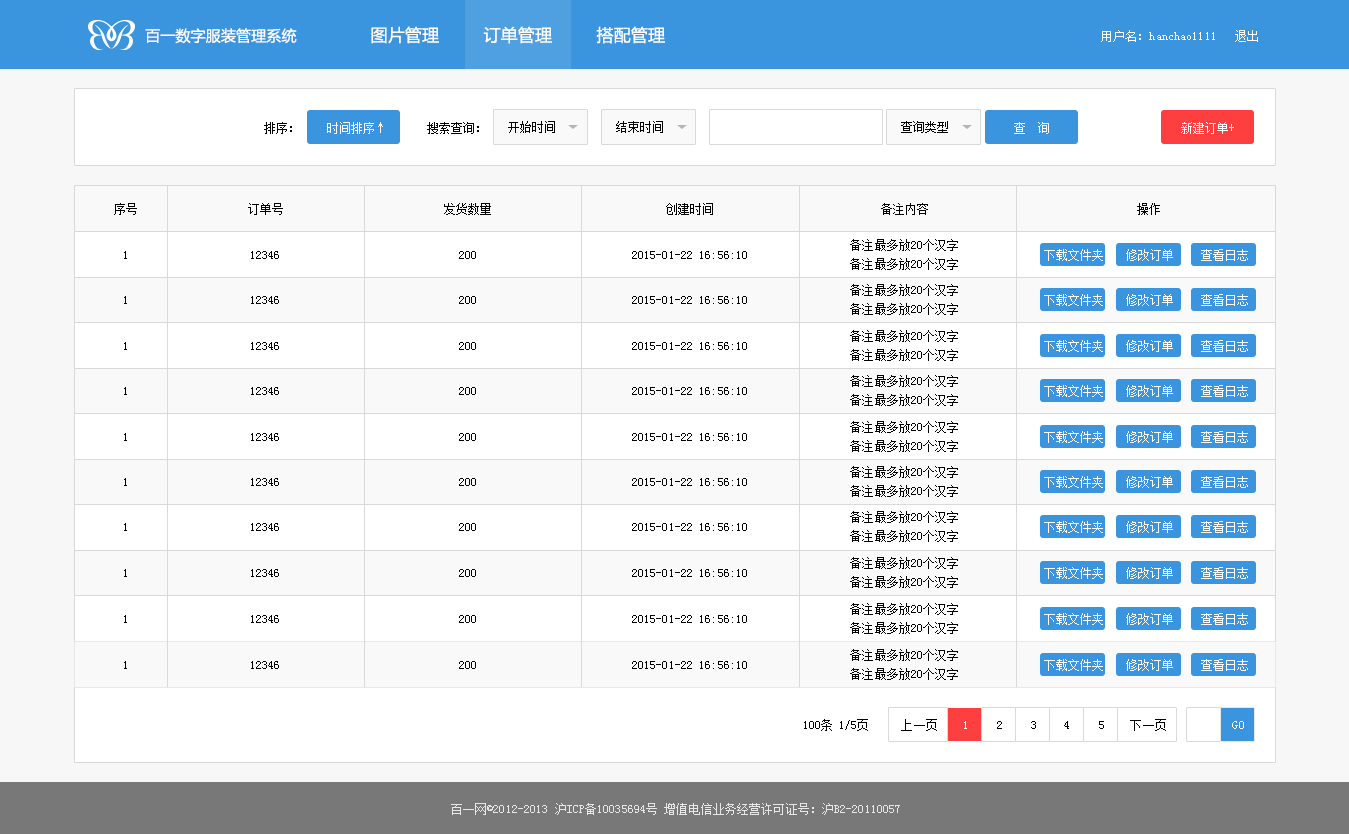
<style>
.page{position:relative;width:1349px;height:834px;background:#ffffff}
.page>*{position:absolute;margin:0}
.t1{font:15px "MicrosoftYaHei";letter-spacing:0.01em;color:#ffffff}
.t2{font:17px "MicrosoftYaHei";letter-spacing:0.01em;color:#ffffff}
.t3{font:12px "SimSun";letter-spacing:0.01em;color:#ffffff}
.t4{font:12px "SimSun";letter-spacing:0.01em;color:#000000}
.t5{font:12px "SimSun";letter-spacing:0.01em;color:#e8e8e8}
</style>
<div class="page">
<p class="t1" style="left:145px;top:28px;width:152px;height:16px">百一数字服装管理系统</p>
<p class="t2" style="left:371px;top:26px;width:68px;height:18px">图片管理</p>
<p class="t2" style="left:483px;top:26px;width:69px;height:18px">订单管理</p>
<p class="t2" style="left:596px;top:26px;width:69px;height:18px">搭配管理</p>
<p class="t3" style="left:1101px;top:30px;width:114px;height:12px">用户名：hanchao1111</p>
<p class="t3" style="left:1235px;top:30px;width:23px;height:12px">退出</p>
<p class="t4" style="left:264px;top:122px;width:28px;height:12px">排序：</p>
<p class="t3" style="left:327px;top:122px;width:56px;height:12px">时间排序↑</p>
<p class="t4" style="left:427px;top:122px;width:52px;height:12px">搜索查询：</p>
<p class="t4" style="left:508px;top:121px;width:47px;height:12px">开始时间</p>
<p class="t4" style="left:616px;top:121px;width:47px;height:12px">结束时间</p>
<p class="t4" style="left:901px;top:121px;width:47px;height:12px">查询类型</p>
<p class="t3" style="left:1014px;top:122px;width:35px;height:12px">查  询</p>
<p class="t3" style="left:1181px;top:122px;width:53px;height:12px">新建订单+</p>
<p class="t4" style="left:114px;top:203px;width:23px;height:12px">序号</p>
<p class="t4" style="left:248px;top:203px;width:35px;height:12px">订单号</p>
<p class="t4" style="left:444px;top:203px;width:47px;height:12px">发货数量</p>
<p class="t4" style="left:666px;top:203px;width:47px;height:12px">创建时间</p>
<p class="t4" style="left:881px;top:203px;width:47px;height:12px">备注内容</p>
<p class="t4" style="left:1137px;top:203px;width:23px;height:12px">操作</p>
<p class="t4" style="left:850px;top:239px;width:108px;height:12px">备注最多放20个汉字</p>
<p class="t4" style="left:124px;top:251px;width:3px;height:8px">1</p>
<p class="t4" style="left:251px;top:251px;width:28px;height:8px">12346</p>
<p class="t4" style="left:459px;top:251px;width:17px;height:8px">200</p>
<p class="t4" style="left:632px;top:251px;width:115px;height:8px">2015-01-22 16:56:10</p>
<p class="t3" style="left:1044px;top:249px;width:59px;height:12px">下载文件夹</p>
<p class="t3" style="left:1126px;top:249px;width:47px;height:12px">修改订单</p>
<p class="t3" style="left:1201px;top:249px;width:47px;height:12px">查看日志</p>
<p class="t4" style="left:850px;top:258px;width:108px;height:12px">备注最多放20个汉字</p>
<p class="t4" style="left:850px;top:284px;width:108px;height:12px">备注最多放20个汉字</p>
<p class="t3" style="left:1044px;top:294px;width:59px;height:12px">下载文件夹</p>
<p class="t3" style="left:1126px;top:294px;width:47px;height:12px">修改订单</p>
<p class="t3" style="left:1201px;top:294px;width:47px;height:12px">查看日志</p>
<p class="t4" style="left:124px;top:296px;width:3px;height:8px">1</p>
<p class="t4" style="left:251px;top:296px;width:28px;height:8px">12346</p>
<p class="t4" style="left:459px;top:296px;width:17px;height:8px">200</p>
<p class="t4" style="left:632px;top:296px;width:115px;height:8px">2015-01-22 16:56:10</p>
<p class="t4" style="left:850px;top:303px;width:108px;height:12px">备注最多放20个汉字</p>
<p class="t4" style="left:124px;top:342px;width:3px;height:8px">1</p>
<p class="t4" style="left:251px;top:342px;width:28px;height:8px">12346</p>
<p class="t4" style="left:459px;top:342px;width:17px;height:8px">200</p>
<p class="t4" style="left:632px;top:342px;width:115px;height:8px">2015-01-22 16:56:10</p>
<p class="t4" style="left:850px;top:330px;width:108px;height:12px">备注最多放20个汉字</p>
<p class="t3" style="left:1044px;top:340px;width:59px;height:12px">下载文件夹</p>
<p class="t3" style="left:1126px;top:340px;width:47px;height:12px">修改订单</p>
<p class="t3" style="left:1201px;top:340px;width:47px;height:12px">查看日志</p>
<p class="t4" style="left:850px;top:349px;width:108px;height:12px">备注最多放20个汉字</p>
<p class="t4" style="left:850px;top:375px;width:108px;height:12px">备注最多放20个汉字</p>
<p class="t4" style="left:124px;top:387px;width:3px;height:8px">1</p>
<p class="t4" style="left:251px;top:387px;width:28px;height:8px">12346</p>
<p class="t4" style="left:459px;top:387px;width:17px;height:8px">200</p>
<p class="t4" style="left:632px;top:387px;width:115px;height:8px">2015-01-22 16:56:10</p>
<p class="t3" style="left:1044px;top:385px;width:59px;height:12px">下载文件夹</p>
<p class="t3" style="left:1126px;top:385px;width:47px;height:12px">修改订单</p>
<p class="t3" style="left:1201px;top:385px;width:47px;height:12px">查看日志</p>
<p class="t4" style="left:850px;top:394px;width:108px;height:12px">备注最多放20个汉字</p>
<p class="t4" style="left:850px;top:421px;width:108px;height:12px">备注最多放20个汉字</p>
<p class="t4" style="left:124px;top:433px;width:3px;height:8px">1</p>
<p class="t4" style="left:251px;top:433px;width:28px;height:8px">12346</p>
<p class="t4" style="left:459px;top:433px;width:17px;height:8px">200</p>
<p class="t4" style="left:632px;top:433px;width:115px;height:8px">2015-01-22 16:56:10</p>
<p class="t3" style="left:1044px;top:431px;width:59px;height:12px">下载文件夹</p>
<p class="t3" style="left:1126px;top:431px;width:47px;height:12px">修改订单</p>
<p class="t3" style="left:1201px;top:431px;width:47px;height:12px">查看日志</p>
<p class="t4" style="left:850px;top:440px;width:108px;height:12px">备注最多放20个汉字</p>
<p class="t4" style="left:850px;top:466px;width:108px;height:12px">备注最多放20个汉字</p>
<p class="t4" style="left:124px;top:478px;width:3px;height:8px">1</p>
<p class="t4" style="left:251px;top:478px;width:28px;height:8px">12346</p>
<p class="t4" style="left:459px;top:478px;width:17px;height:8px">200</p>
<p class="t4" style="left:632px;top:478px;width:115px;height:8px">2015-01-22 16:56:10</p>
<p class="t4" style="left:850px;top:485px;width:108px;height:12px">备注最多放20个汉字</p>
<p class="t3" style="left:1044px;top:476px;width:59px;height:12px">下载文件夹</p>
<p class="t3" style="left:1126px;top:476px;width:47px;height:12px">修改订单</p>
<p class="t3" style="left:1201px;top:476px;width:47px;height:12px">查看日志</p>
<p class="t4" style="left:850px;top:511px;width:108px;height:12px">备注最多放20个汉字</p>
<p class="t3" style="left:1044px;top:521px;width:59px;height:12px">下载文件夹</p>
<p class="t3" style="left:1126px;top:521px;width:47px;height:12px">修改订单</p>
<p class="t3" style="left:1201px;top:521px;width:47px;height:12px">查看日志</p>
<p class="t4" style="left:124px;top:523px;width:3px;height:8px">1</p>
<p class="t4" style="left:251px;top:523px;width:28px;height:8px">12346</p>
<p class="t4" style="left:459px;top:523px;width:17px;height:8px">200</p>
<p class="t4" style="left:632px;top:523px;width:115px;height:8px">2015-01-22 16:56:10</p>
<p class="t4" style="left:850px;top:530px;width:108px;height:12px">备注最多放20个汉字</p>
<p class="t4" style="left:850px;top:557px;width:108px;height:12px">备注最多放20个汉字</p>
<p class="t4" style="left:124px;top:569px;width:3px;height:8px">1</p>
<p class="t4" style="left:251px;top:569px;width:28px;height:8px">12346</p>
<p class="t4" style="left:459px;top:569px;width:17px;height:8px">200</p>
<p class="t4" style="left:632px;top:569px;width:115px;height:8px">2015-01-22 16:56:10</p>
<p class="t3" style="left:1044px;top:567px;width:59px;height:12px">下载文件夹</p>
<p class="t3" style="left:1126px;top:567px;width:47px;height:12px">修改订单</p>
<p class="t3" style="left:1201px;top:567px;width:47px;height:12px">查看日志</p>
<p class="t4" style="left:850px;top:576px;width:108px;height:12px">备注最多放20个汉字</p>
<p class="t4" style="left:850px;top:603px;width:108px;height:12px">备注最多放20个汉字</p>
<p class="t4" style="left:124px;top:615px;width:3px;height:8px">1</p>
<p class="t4" style="left:251px;top:615px;width:28px;height:8px">12346</p>
<p class="t4" style="left:459px;top:615px;width:17px;height:8px">200</p>
<p class="t4" style="left:632px;top:615px;width:115px;height:8px">2015-01-22 16:56:10</p>
<p class="t3" style="left:1044px;top:613px;width:59px;height:12px">下载文件夹</p>
<p class="t3" style="left:1126px;top:613px;width:47px;height:12px">修改订单</p>
<p class="t3" style="left:1201px;top:613px;width:47px;height:12px">查看日志</p>
<p class="t4" style="left:850px;top:622px;width:108px;height:12px">备注最多放20个汉字</p>
<p class="t4" style="left:850px;top:649px;width:108px;height:12px">备注最多放20个汉字</p>
<p class="t4" style="left:124px;top:661px;width:3px;height:8px">1</p>
<p class="t4" style="left:251px;top:661px;width:28px;height:8px">12346</p>
<p class="t4" style="left:459px;top:661px;width:17px;height:8px">200</p>
<p class="t4" style="left:632px;top:661px;width:115px;height:8px">2015-01-22 16:56:10</p>
<p class="t3" style="left:1044px;top:659px;width:59px;height:12px">下载文件夹</p>
<p class="t3" style="left:1126px;top:659px;width:47px;height:12px">修改订单</p>
<p class="t3" style="left:1201px;top:659px;width:47px;height:12px">查看日志</p>
<p class="t4" style="left:850px;top:668px;width:108px;height:12px">备注最多放20个汉字</p>
<p class="t4" style="left:804px;top:719px;width:64px;height:12px">100条 1/5页</p>
<p class="t4" style="left:901px;top:719px;width:36px;height:12px">上一页</p>
<p class="t3" style="left:964px;top:721px;width:3px;height:8px">1</p>
<p class="t4" style="left:997px;top:721px;width:5px;height:8px">2</p>
<p class="t4" style="left:1031px;top:721px;width:5px;height:8px">3</p>
<p class="t4" style="left:1064px;top:721px;width:5px;height:8px">4</p>
<p class="t4" style="left:1099px;top:721px;width:5px;height:8px">5</p>
<p class="t4" style="left:1130px;top:719px;width:36px;height:12px">下一页</p>
<p class="t3" style="left:1232px;top:721px;width:12px;height:8px">GO</p>
<p class="t5" style="left:451px;top:803px;width:449px;height:12px">百一网©2012-2013 沪ICP备10035694号 增值电信业务经营许可证号：沪B2-20110057</p>
</div>
